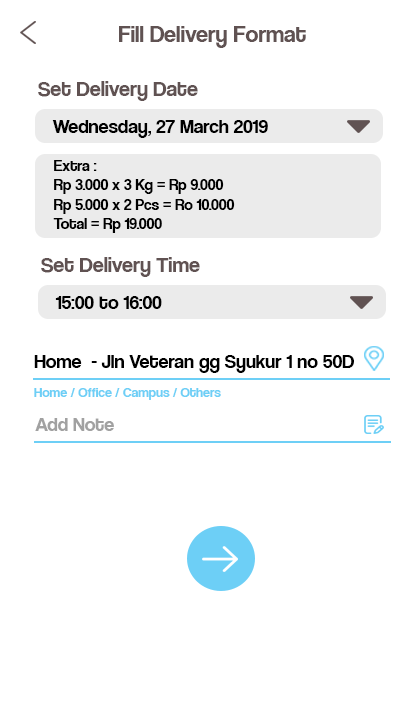
<style>
.page{position:relative;width:420px;height:720px;background:#ffffff}
.page>*{position:absolute;margin:0}
.t1{font:24px "CoolveticaRg-Regular";color:#605252}
.t2{font:22px "CoolveticaRg-Regular";color:#605252}
.t3{font:20px "CoolveticaRg-Regular";color:#000000}
.t4{font:16px "CoolveticaRg-Regular";color:#000000}
.t5{font:14px "CoolveticaRg-Regular";color:#6dcff6}
.t6{font:20px "CoolveticaRg-Regular";color:#a1a1a1}
</style>
<div class="page">
<p class="t1" style="left:119px;top:26px;width:187px;height:22px">Fill Delivery Format</p>
<p class="t2" style="left:38px;top:81px;width:160px;height:20px">Set Delivery Date</p>
<p class="t3" style="left:52px;top:120px;width:216px;height:18px">Wednesday, 27 March 2019</p>
<p class="t4" style="left:53px;top:160px;width:182px;height:73px">Extra :<br>Rp 3.000 x 3 Kg = Rp 9.000<br>Rp 5.000 x 2 Pcs = Ro 10.000<br>Total = Rp 19.000</p>
<p class="t2" style="left:41px;top:257px;width:159px;height:20px">Set Delivery Time</p>
<p class="t3" style="left:55px;top:296px;width:107px;height:13px">15:00 to 16:00</p>
<p class="t3" style="left:34px;top:355px;width:320px;height:18px">Home  - Jln Veteran gg Syukur 1 no 50D</p>
<p class="t5" style="left:34px;top:388px;width:187px;height:12px">Home / Office / Campus / Others</p>
<p class="t6" style="left:35px;top:418px;width:79px;height:13px">Add Note</p>
</div>
